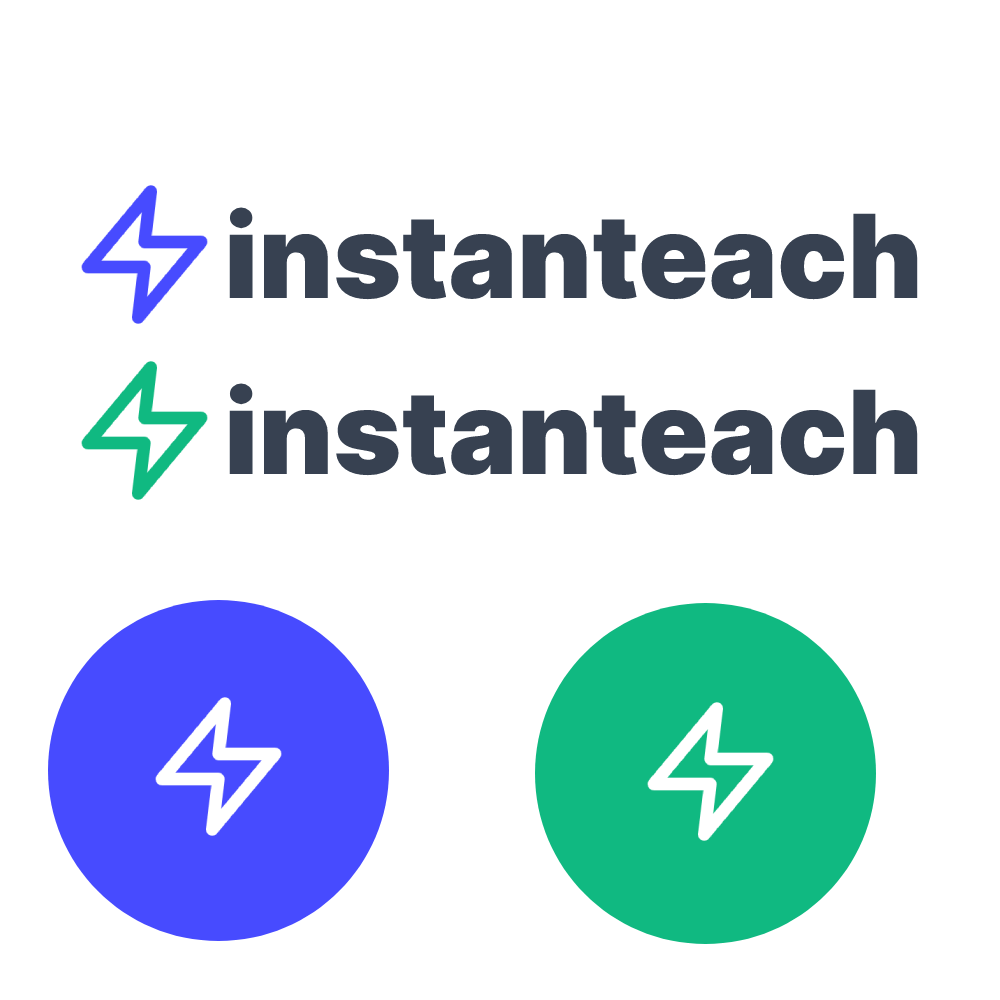
<style>
.page{position:relative;width:1000px;height:1000px;background:#ffffff}
.page>*{position:absolute;margin:0}
.t1{font:116px "Inter-Black";color:#374151}
</style>
<div class="page">
<p class="t1" style="left:229px;top:207px;width:689px;height:93px">instanteach</p>
<p class="t1" style="left:229px;top:383px;width:689px;height:93px">instanteach</p>
</div>
